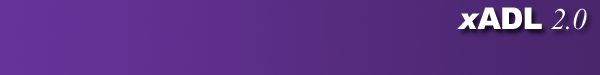
<style>
.page{position:relative;width:600px;height:75px}
.page>*{position:absolute;margin:0}
.t1{font:30px "Arial-Black";letter-spacing:-0.025em;color:#ffffff}
.t2{font:30px "Arial-BlackItalic";letter-spacing:-0.025em;color:#ffffff}
.t3{font:30px "TimesNewRomanPS-ItalicMT";letter-spacing:-0.025em;color:#ffffff}
</style>
<div class="page">
<p class="t1" style="left:457px;top:7px;width:130px;height:23px"><span class="t2">x</span>ADL <span class="t3">2.0</span></p>
</div>
